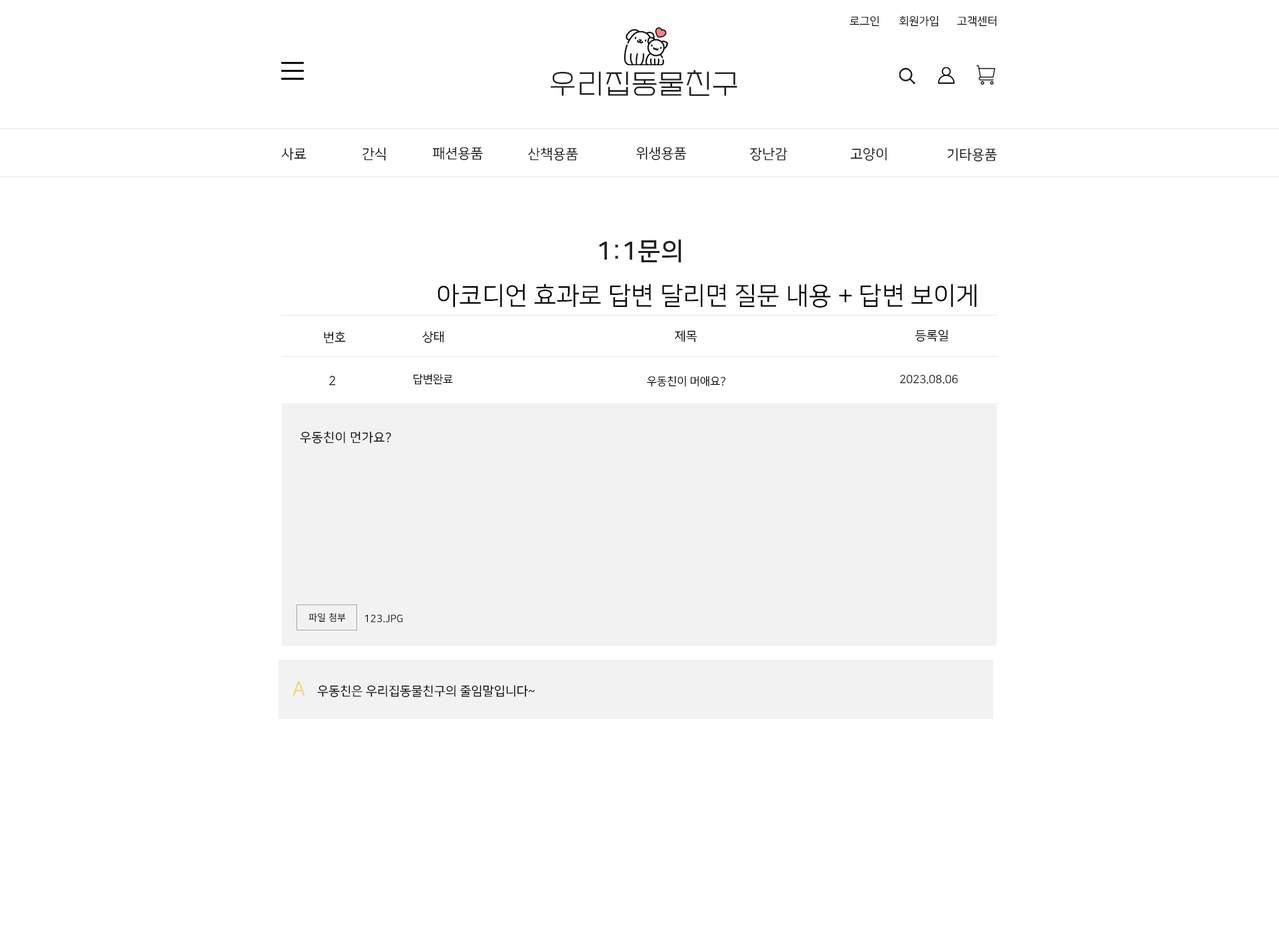
<style>
.page{position:relative;width:1279px;height:932px;background:#ffffff}
.page>*{position:absolute;margin:0}
.t1{font:11.1px "NanumSquareR";color:#000000}
.t2{font:27.8px "EF_watermelonSalad";letter-spacing:0.025em;color:#202020}
.t3{font:13.9px "NanumSquareR";color:#000000}
.t4{font:25px "NanumSquareB";letter-spacing:0.025em;color:#202020}
.t5{font:25px "NanumSquareR";color:#000000}
.t6{font:12.5px "NanumSquareR";color:#000000}
.t7{font:12.5px "NanumSquareR";letter-spacing:0.025em;color:#000000}
.t8{font:9.3px "NanumSquareR";letter-spacing:0.025em;color:#000000}
.t9{font:10px "NanumSquareR";letter-spacing:0.025em;color:#000000}
.t10{font:19.4px "NanumSquareR";letter-spacing:0.025em;color:#f5d35d}
</style>
<div class="page">
<p class="t1" style="left:849px;top:15px;width:30px;height:12px">로그인</p>
<p class="t1" style="left:899px;top:15px;width:39px;height:12px">회원가입</p>
<p class="t1" style="left:957px;top:15px;width:39px;height:12px">고객센터</p>
<p class="t2" style="left:550px;top:70px;width:187px;height:26px">우리집동물친구</p>
<p class="t3" style="left:281px;top:147px;width:25px;height:14px">사료</p>
<p class="t3" style="left:362px;top:147px;width:24px;height:14px">간식</p>
<p class="t3" style="left:432px;top:147px;width:51px;height:14px">패션용품</p>
<p class="t3" style="left:528px;top:147px;width:50px;height:14px">산책용품</p>
<p class="t3" style="left:636px;top:147px;width:50px;height:14px">위생용품</p>
<p class="t3" style="left:750px;top:147px;width:37px;height:14px">장난감</p>
<p class="t3" style="left:850px;top:147px;width:37px;height:14px">고양이</p>
<p class="t3" style="left:947px;top:148px;width:50px;height:14px">기타용품</p>
<p class="t4" style="left:599px;top:239px;width:82px;height:24px">1:1문의</p>
<p class="t5" style="left:438px;top:284px;width:538px;height:24px">아코디언 효과로 답변 달리면 질문 내용 + 답변 보이게</p>
<p class="t6" style="left:915px;top:330px;width:33px;height:12px">등록일</p>
<p class="t6" style="left:324px;top:332px;width:22px;height:12px">번호</p>
<p class="t6" style="left:422px;top:331px;width:22px;height:13px">상태</p>
<p class="t6" style="left:675px;top:330px;width:22px;height:12px">제목</p>
<p class="t6" style="left:329px;top:376px;width:7px;height:10px">2</p>
<p class="t1" style="left:413px;top:374px;width:40px;height:11px">답변완료</p>
<p class="t1" style="left:647px;top:376px;width:78px;height:11px">우동친이 머애요?</p>
<p class="t1" style="left:900px;top:375px;width:58px;height:9px">2023.08.06</p>
<p class="t7" style="left:300px;top:432px;width:91px;height:12px">우동친이 먼가요?</p>
<p class="t8" style="left:308px;top:613px;width:38px;height:10px">파일 첨부</p>
<p class="t9" style="left:364px;top:615px;width:39px;height:8px">123.JPG</p>
<p class="t6" style="left:292px;top:681px;width:243px;height:17px"><span class="t10">A   </span>우동친은 우리집동물친구의 줄임말입니다~</p>
</div>
